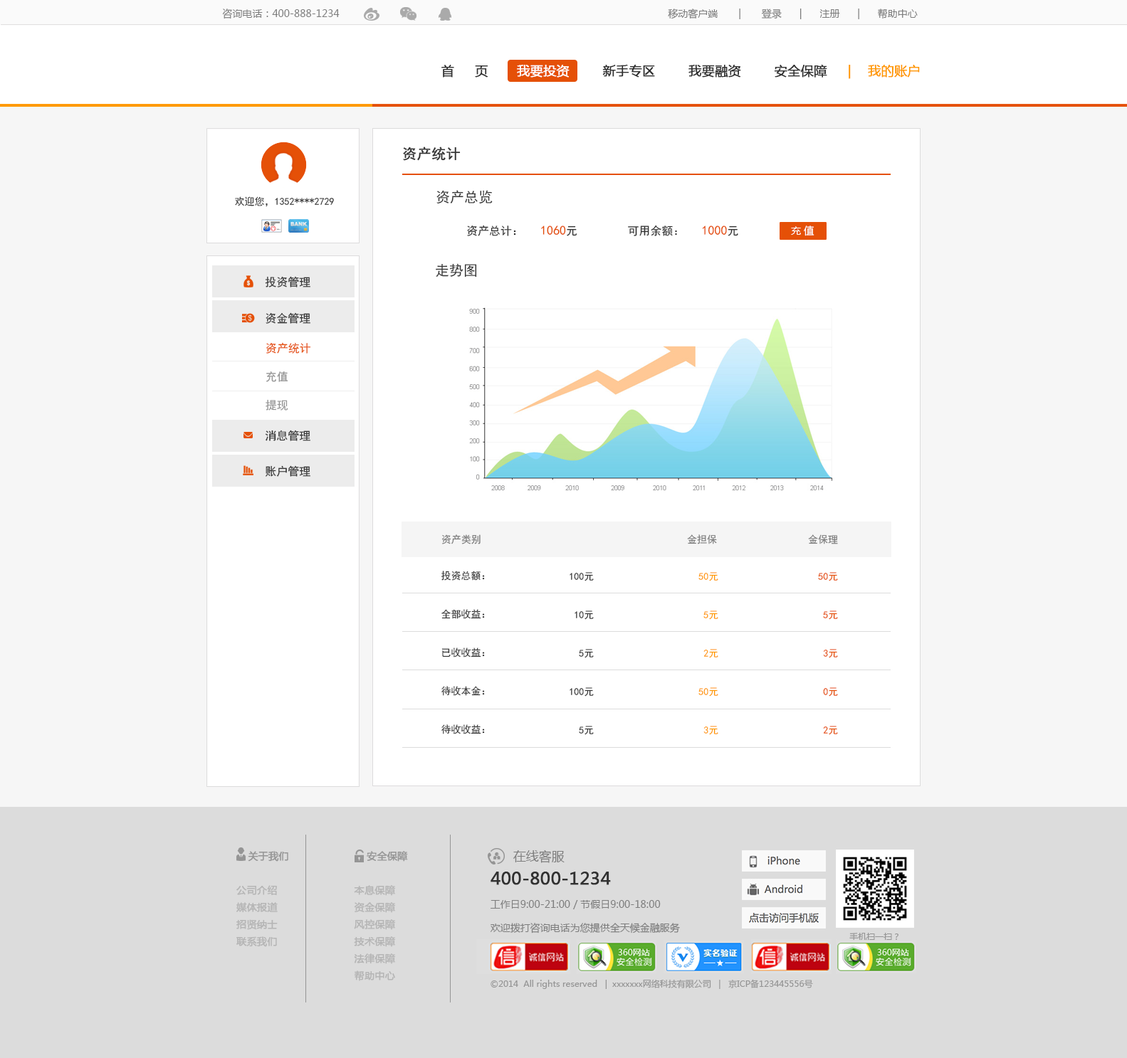
<style>
.page{position:relative;width:1127px;height:1058px;background:#ffffff}
.page>*{position:absolute;margin:0}
.t1{font:10px "MicrosoftYaHei";color:#7d7d7d}
.t2{font:12.8px "MicrosoftYaHei";color:#313131;font-weight:bold}
.t3{font:12.8px "MicrosoftYaHei";color:#ffffff;font-weight:bold}
.t4{font:12.8px "MicrosoftYaHei";color:#ff9900;font-weight:bold}
.t5{font:14.2px "SimHei";color:#333333;font-weight:bold}
.t6{font:10px "SimHei";color:#333333}
.t7{font:14.2px "SimHei";color:#333333}
.t8{font:11.4px "SimHei";color:#313131}
.t9{font:12.8px "SimHei";color:#e44f07}
.t10{font:12.8px "SimHei";color:#e55007}
.t11{font:10px "MicrosoftYaHei";color:#ffffff}
.t12{font:11.4px/36.3px "SimHei";color:#333333}
.t13{font:11.4px/39.1px "SimHei";color:#333333}
.t14{font:11.4px/35.6px "SimHei";color:#333333}
.t15{font:11.4px/28.5px "SimHei";color:#959595}
.t16{font:11.4px/28.5px "SimHei";color:#e55007}
.t17{font:10px "SimHei";color:#787878}
.t18{font:10px/19.2px "SimHei";color:#333333}
.t19{font:10px/19.2px "SimHei";color:#ff9900}
.t20{font:10px/19.2px "SimHei";color:#e55007}
.t21{font:10px/17.1px "MicrosoftYaHei";color:#b5b5b5;font-weight:bold}
.t22{font:12.8px/17.1px "MicrosoftYaHei";color:#959595;font-weight:bold}
.t23{font:10px/17.1px "MicrosoftYaHei";color:#959595;font-weight:bold}
.t24{font:10px/23.5px "MicrosoftYaHei";color:#7d7d7d}
.t25{font:12.8px/23.5px "MicrosoftYaHei";color:#7d7d7d}
.t26{font:17.1px/23.5px "MicrosoftYaHei";color:#313131;font-weight:bold}
.t27{font:8.5px "MicrosoftYaHei";color:#959595}
</style>
<div class="page">
<p class="t1" style="left:222px;top:9px;width:117px;height:10px">咨询电话：400-888-1234</p>
<p class="t1" style="left:668px;top:9px;width:249px;height:10px">移动客户端       |       登录      |      注册      |      帮助中心</p>
<p class="t2" style="left:441px;top:64px;width:479px;height:15px">首     页    <span class="t3">   我要投资</span>        新手专区        我要融资        安全保障     <span class="t4">|    我的账户</span></p>
<p class="t5" style="left:403px;top:147px;width:57px;height:14px">资产统计</p>
<p class="t6" style="left:235px;top:196px;width:99px;height:11px">欢迎您，1352****2729</p>
<p class="t7" style="left:436px;top:190px;width:57px;height:14px">资产总览</p>
<p class="t8" style="left:467px;top:225px;width:110px;height:11px">资产总计：   <span class="t9">1060</span>元</p>
<p class="t8" style="left:628px;top:225px;width:110px;height:11px">可用余额：   <span class="t10">1000</span>元</p>
<p class="t11" style="left:791px;top:226px;width:23px;height:10px">充 值</p>
<p class="t7" style="left:436px;top:263px;width:41px;height:15px">走势图</p>
<p class="t12" style="left:265px;top:276px;width:45px;height:201px">投资管理<br>资金管理<br><span class="t13"><br><br>消息管理<br></span><span class="t14">账户管理</span></p>
<p class="t15" style="left:265px;top:342px;width:46px;height:69px"><span class="t16">资产统计<br></span>充值<br>提现</p>
<p class="t17" style="left:441px;top:535px;width:39px;height:9px">资产类别</p>
<p class="t17" style="left:687px;top:535px;width:30px;height:9px">金担保</p>
<p class="t17" style="left:808px;top:535px;width:30px;height:9px">金保理</p>
<p class="t18" style="left:441px;top:571px;width:44px;height:164px">投资总额：<br><br>全部收益：<br><br>已收收益：<br><br>待收本金：<br><br>待收收益：</p>
<p class="t18" style="left:569px;top:572px;width:269px;height:163px">100元                     <span class="t19">50元                    </span><span class="t20">50元<br><br></span> 10元                     <span class="t19"> 5元                     </span><span class="t20">5元<br></span><br>  5元                     <span class="t19"> 2元                     </span><span class="t20">3元<br><br></span>100元                     <span class="t19">50元                     </span><span class="t20">0元<br></span><br>  5元                      <span class="t19">3元                     </span><span class="t20">2元</span></p>
<p class="t21" style="left:236px;top:851px;width:52px;height:96px"><span class="t22">    </span><span class="t23"> 关于我们<br><br>  </span>公司介绍<br>  媒体报道<br>  招贤纳士<br>  联系我们</p>
<p class="t21" style="left:354px;top:851px;width:54px;height:130px"><span class="t22">   </span><span class="t23">安全保障<br><br></span>本息保障<br>资金保障<br>风控保障<br>技术保障<br>法律保障<br>帮助中心</p>
<p class="t24" style="left:490px;top:850px;width:190px;height:84px"><span class="t25">      在线客服<br></span><span class="t26">400-800-1234<br></span>工作日9:00-21:00 / 节假日9:00-18:00<br>欢迎拨打咨询电话为您提供全天候金融服务</p>
<p class="t27" style="left:849px;top:933px;width:49px;height:9px">手机扫一扫？</p>
<p class="t27" style="left:490px;top:979px;width:323px;height:10px">©2014  All rights reserved   |  xxxxxxx网络科技有限公司   |   京ICP备123445556号</p>
</div>
